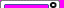
<style>
.page{position:relative;width:64px;height:8px;background:#ffffff}
.page>*{position:absolute;margin:0}
.t1{font:7.7px "Arial-Black";letter-spacing:-0.01em;color:#101010;scale:1.18 1}
</style>
<div class="page">
<p class="t1" style="left:49px;top:2px;width:8px;height:6px">O</p>
</div>
